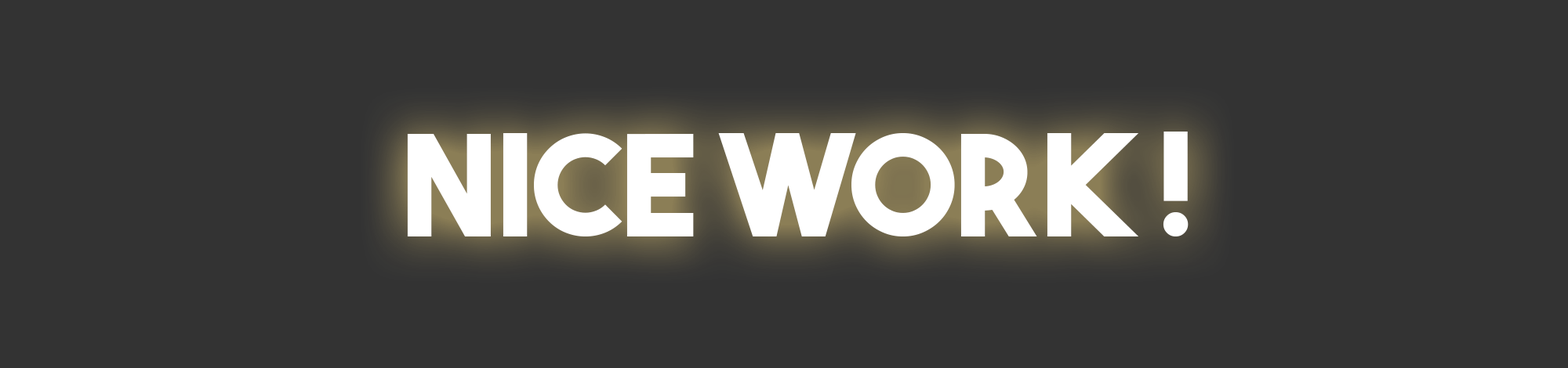
<style>
.page{position:relative;width:1568px;height:368px;background:#333333}
.page>*{position:absolute;margin:0}
.t1{font:140.2px "TheBoldFont";color:#ffffff}
</style>
<div class="page">
<p class="t1" style="left:407px;top:132px;width:782px;height:105px">nice work !</p>
</div>
